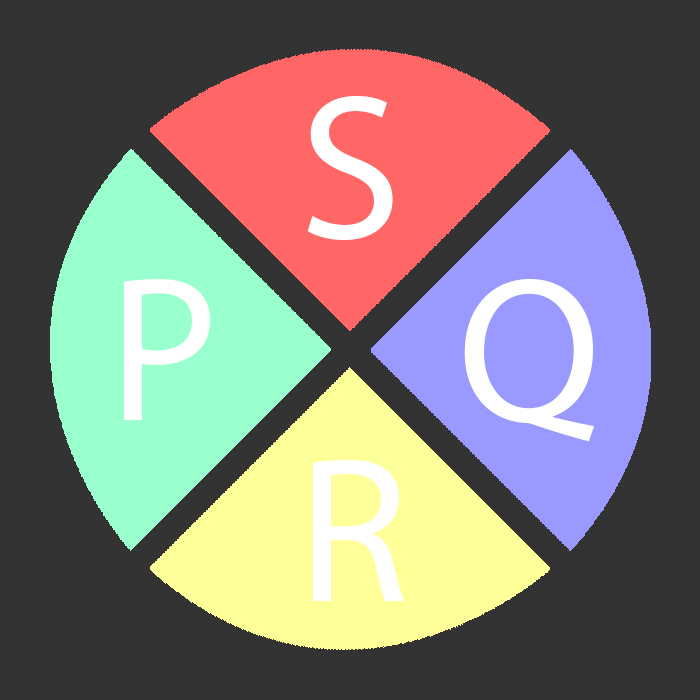
<style>
.page{position:relative;width:700px;height:700px;background:#333333}
.page>*{position:absolute;margin:0}
.t1{font:208.1px "MyriadPro-Regular";color:#ffffff}
</style>
<div class="page">
<p class="t1" style="left:307px;top:96px;width:86px;height:144px">S</p>
<p class="t1" style="left:124px;top:279px;width:86px;height:141px">P</p>
<p class="t1" style="left:464px;top:279px;width:131px;height:163px">Q</p>
<p class="t1" style="left:313px;top:460px;width:91px;height:141px">R</p>
</div>
